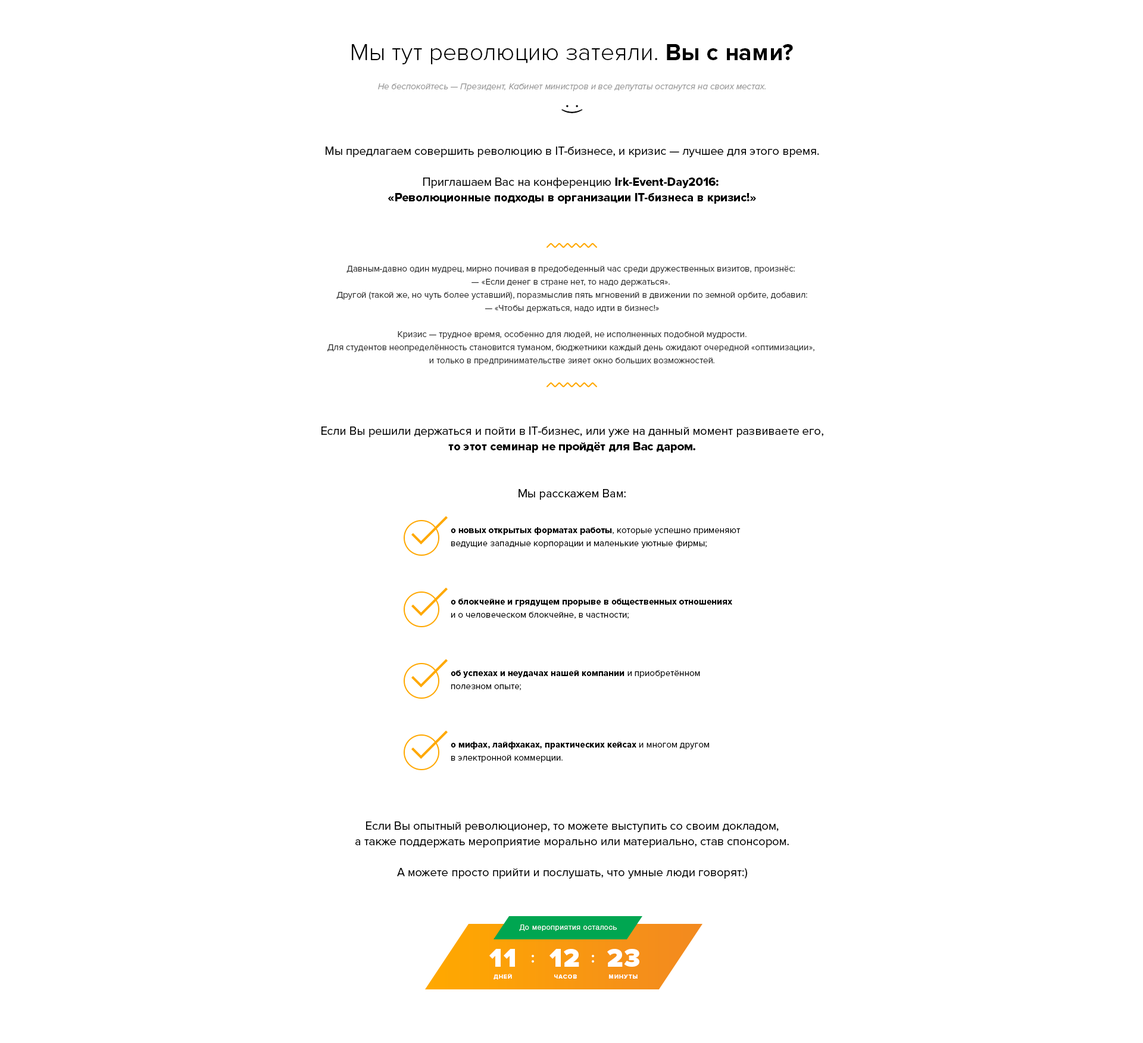
<style>
.page{position:relative;width:1143px;height:1043px;background:#ffffff}
.page>*{position:absolute;margin:0}
.t1{font:23.8px "ProximaNova-Light";letter-spacing:0.01em;color:#000000}
.t2{font:23.8px "ProximaNova-Bold";letter-spacing:0.01em;color:#000000}
.t3{font:8.9px "ProximaNova-RegularIt";color:#9a9a9a}
.t4{font:11.9px/15.5px "ProximaNova-Regular";color:#000000}
.t5{font:11.9px/15.5px "ProximaNova-Extrabld";color:#000000}
.t6{font:8.9px/13.1px "ProximaNova-Regular";color:#333333}
.t7{font:11.9px "ProximaNova-Regular";color:#000000}
.t8{font:8.9px/13.1px "ProximaNova-Regular";letter-spacing:0.01em;color:#000000}
.t9{font:8.9px/13.1px "ProximaNova-Extrabld";letter-spacing:0.01em;color:#000000}
</style>
<div class="page">
<p class="t1" style="left:352px;top:44px;width:441px;height:20px">Мы тут революцию затеяли. <span class="t2">Вы с нами?</span></p>
<p class="t3" style="left:378px;top:83px;width:388px;height:8px">Не беспокойтесь — Президент, Кабинет министров и все депутаты останутся на своих местах.</p>
<p class="t1" style="left:562px;top:105px;width:21px;height:8px;rotate:90deg">:)</p>
<p class="t4" style="left:326px;top:147px;width:493px;height:57px;text-align:center">Мы предлагаем совершить революцию в IT-бизнесе, и кризис — лучшее для этого время.<br><br>Приглашаем Вас на конференцию <span class="t5">Irk-Event-Day2016: <br>«Революционные подходы в организации IT-бизнеса в кризис!»</span></p>
<p class="t6" style="left:328px;top:266px;width:487px;height:99px;text-align:center">Давным-давно один мудрец, мирно почивая в предобеденный час среди дружественных визитов, произнёс: <br>— «Если денег в стране нет, то надо держаться». <br>Другой (такой же, но чуть более уставший), поразмыслив пять мгновений в движении по земной орбите, добавил:<br>— «Чтобы держаться, надо идти в бизнес!»<br><br>Кризис — трудное время, особенно для людей, не исполненных подобной мудрости.<br>Для студентов неопределённость становится туманом, бюджетники каждый день ожидают очередной «оптимизации», <br>и только в предпринимательстве зияет окно больших возможностей.</p>
<p class="t4" style="left:322px;top:426px;width:502px;height:27px;text-align:center">Если Вы решили держаться и пойти в IT-бизнес, или уже на данный момент развиваете его,<br><span class="t5">то этот семинар не пройдёт для Вас даром.</span></p>
<p class="t7" style="left:519px;top:489px;width:107px;height:11px">Мы расскажем Вам:</p>
<p class="t8" style="left:451px;top:527px;width:290px;height:21px"><span class="t9">о новых открытых форматах работы</span>, которые успешно применяют <br>ведущие западные корпорации и маленькие уютные фирмы;</p>
<p class="t9" style="left:451px;top:599px;width:282px;height:20px">о блокчейне и грядущем прорыве в общественных отношениях<span class="t8"> <br>и о человеческом блокчейне, в частности;</span></p>
<p class="t9" style="left:451px;top:670px;width:249px;height:20px">об успехах и неудачах нашей компании<span class="t8"> и приобретённом <br>полезном опыте;</span></p>
<p class="t8" style="left:451px;top:741px;width:258px;height:21px"><span class="t9">о мифах, лайфхаках, практических кейсах</span> и многом другом <br>в электронной коммерции.</p>
<p class="t4" style="left:356px;top:821px;width:433px;height:57px;text-align:center">Если Вы опытный революционер, то можете выступить со своим докладом,<br>а также поддержать мероприятие морально или материально, став спонсором.<br><br>А можете просто прийти и послушать, что умные люди говорят:)</p>
</div>
